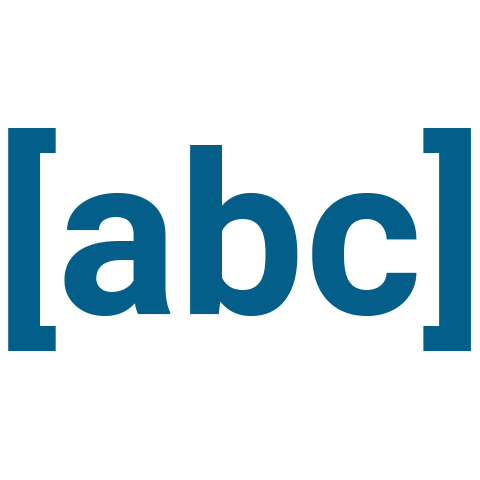
<style>
.page{position:relative;width:480px;height:480px;background:#ffffff}
.page>*{position:absolute;margin:0}
.t1{font:225px "Roboto-Bold";color:#035f8a}
</style>
<div class="page">
<p class="t1" style="left:8px;top:128px;width:463px;height:223px">[abc]</p>
</div>
